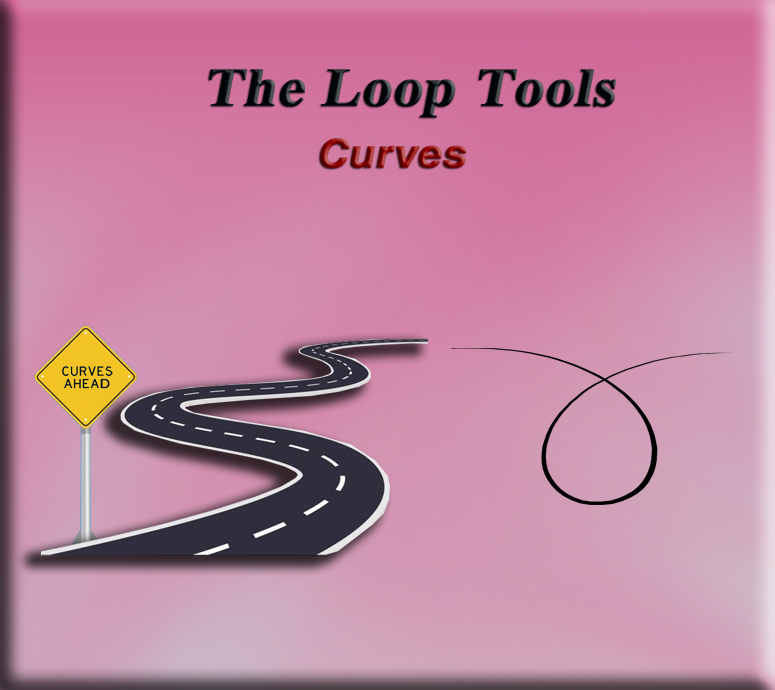
<style>
.page{position:relative;width:775px;height:690px}
.page>*{position:absolute;margin:0}
.t1{font:53.9px "TimesNewRomanPS-BoldMT";color:#000609;font-weight:bold;font-style:italic;scale:1.08 1}
.t2{font:39.1px "HelveticaLTStd-Bold";font-weight:bold;font-style:italic;scale:1.08 1}
.t3{font:53.9px "TimesNewRomanPS-BoldMT";font-weight:bold;font-style:italic;scale:1.08 1}
</style>
<div class="page">
<p class="t1" style="left:209px;top:69px;width:407px;height:49px">The Loop Tools</p>
<p class="t2" style="left:320px;top:138px;width:147px;height:31px"><span class="t3"> </span>Curves</p>
</div>
